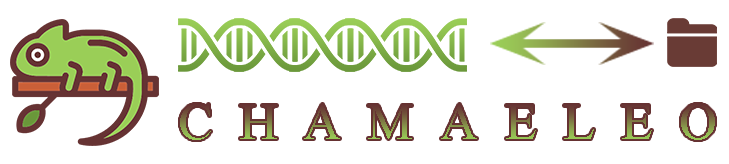
<style>
.page{position:relative;width:729px;height:164px;background:#ffffff}
.page>*{position:absolute;margin:0}
.t1{font:90px "TimesNewRomanPSMT";letter-spacing:0.5em}
</style>
<div class="page">
<p class="t1" style="left:180px;top:104px;width:535px;height:36px">CHAMAELEO</p>
</div>
